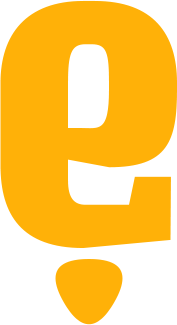
<style>
.page{position:relative;width:177px;height:325px;background:#ffb108}
.page>*{position:absolute;margin:0}
.t1{font:450px "RogueSerif-Bold";letter-spacing:0.05em;color:#ffb108}
</style>
<div class="page">
<p class="t1" style="left:0px;top:0px;width:177px;height:248px">e</p>
</div>
